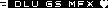
<style>
.page{position:relative;width:108px;height:8px;background:#000000}
.page>*{position:absolute;margin:0}
.t1{font:10px "Uni0554";color:#ffffff}
</style>
<div class="page">
<p class="t1" style="left:15px;top:1px;width:78px;height:6px">DLU GS MFX</p>
</div>
